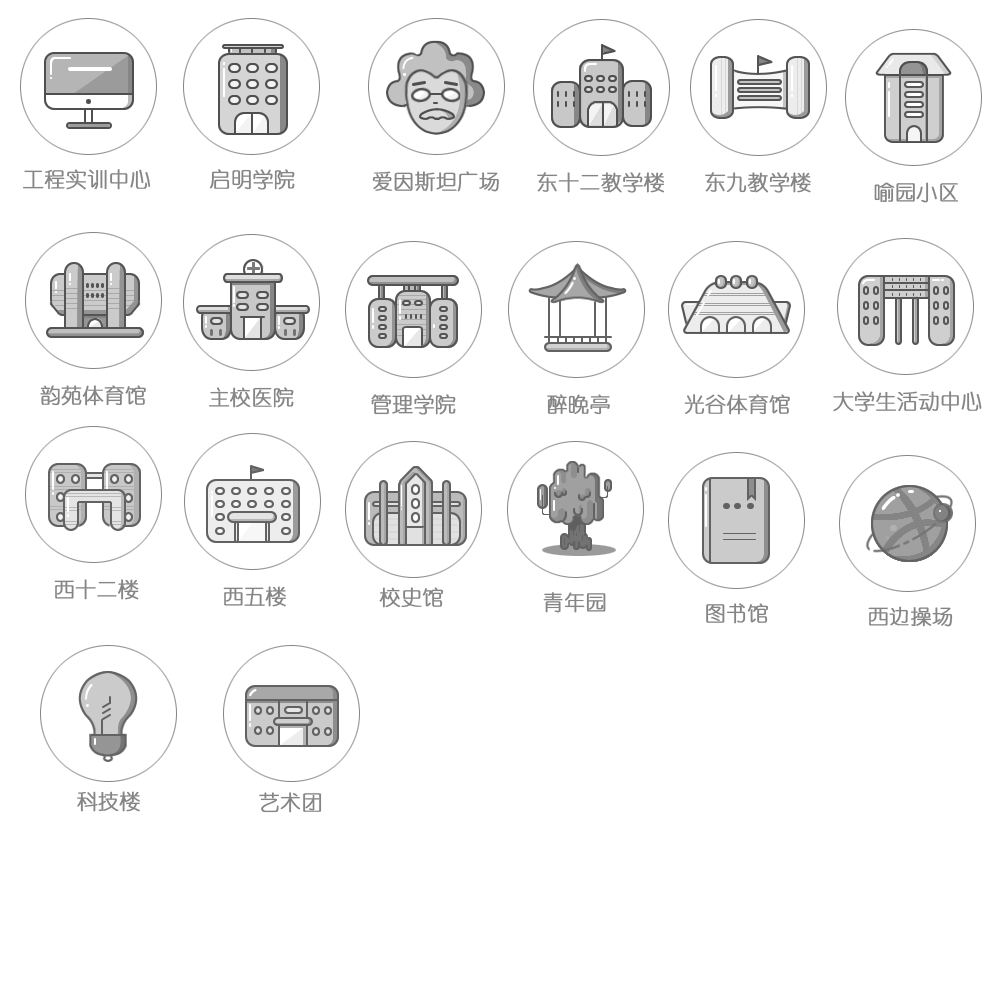
<style>
.page{position:relative;width:1000px;height:1000px;background:#ffffff}
.page>*{position:absolute;margin:0}
.t1{font:20.8px "YouYuan";color:#868585;font-weight:bold}
</style>
<div class="page">
<p class="t1" style="left:23px;top:169px;width:128px;height:21px">工程实训中心</p>
<p class="t1" style="left:209px;top:169px;width:86px;height:21px">启明学院</p>
<p class="t1" style="left:372px;top:171px;width:127px;height:21px">爱因斯坦广场</p>
<p class="t1" style="left:537px;top:172px;width:128px;height:21px">东十二教学楼</p>
<p class="t1" style="left:705px;top:172px;width:106px;height:21px">东九教学楼</p>
<p class="t1" style="left:874px;top:182px;width:84px;height:21px">喻园小区</p>
<p class="t1" style="left:40px;top:385px;width:106px;height:21px">韵苑体育馆</p>
<p class="t1" style="left:209px;top:387px;width:85px;height:21px">主校医院</p>
<p class="t1" style="left:371px;top:394px;width:85px;height:21px">管理学院</p>
<p class="t1" style="left:547px;top:394px;width:63px;height:21px">醉晚亭</p>
<p class="t1" style="left:684px;top:394px;width:106px;height:21px">光谷体育馆</p>
<p class="t1" style="left:833px;top:391px;width:149px;height:21px">大学生活动中心</p>
<p class="t1" style="left:54px;top:579px;width:85px;height:21px">西十二楼</p>
<p class="t1" style="left:223px;top:586px;width:63px;height:21px">西五楼</p>
<p class="t1" style="left:379px;top:587px;width:65px;height:21px">校史馆</p>
<p class="t1" style="left:543px;top:592px;width:63px;height:21px">青年园</p>
<p class="t1" style="left:706px;top:603px;width:63px;height:21px">图书馆</p>
<p class="t1" style="left:868px;top:606px;width:85px;height:21px">西边操场</p>
<p class="t1" style="left:77px;top:791px;width:63px;height:21px">科技楼</p>
<p class="t1" style="left:259px;top:792px;width:63px;height:21px">艺术团</p>
</div>
